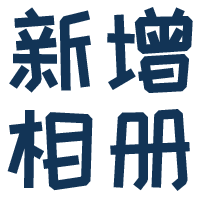
<style>
.page{position:relative;width:200px;height:200px;background:#ffffff}
.page>*{position:absolute;margin:0}
.t1{font:99.9px/99.9px "HappyZcool-2016";color:#123456}
</style>
<div class="page">
<p class="t1" style="left:7px;top:7px;width:186px;height:184px">新增<br>相册</p>
</div>
